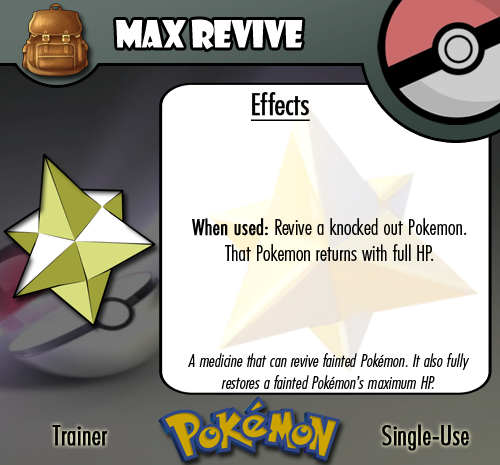
<style>
.page{position:relative;width:500px;height:465px;background:#ffffff}
.page>*{position:absolute;margin:0}
.t1{font:36.7px "ShowcardGothic-Reg";letter-spacing:-0.025em;color:#ffffff;scale:0.91 1}
.t2{font:22.2px "FuturaCondensedBQ-Light";color:#010101}
.t3{font:27.8px "FuturaCondensedBQ-Light";color:#010101;font-weight:bold}
.t4{font:30.6px "FuturaCondensedBQ-Light";color:#010101;font-weight:bold;text-decoration:underline}
.t5{font:22.2px "FuturaCondensedBQ-Light";color:#010101;font-weight:bold}
.t6{font:18.1px "FuturaCondensedBQ-Light";color:#010101;font-style:italic}
</style>
<div class="page">
<p class="t1" style="left:116px;top:19px;width:187px;height:31px">Max revive</p>
<p class="t2" style="left:192px;top:92px;width:275px;height:169px"><span class="t3">  </span><span class="t4">Effects<br><br><br><br><br><br><br><br></span><span class="t5">When used: </span>Revive a knocked out Pokemon. That Pokemon returns with full HP.</p>
<p class="t6" style="left:188px;top:353px;width:281px;height:36px;text-align:center">A medicine that can revive fainted Pokémon. It also fully restores a fainted Pokémon’s maximum HP.</p>
<p class="t3" style="left:52px;top:425px;width:55px;height:21px">Trainer</p>
<p class="t3" style="left:382px;top:424px;width:87px;height:27px">Single-Use</p>
</div>
